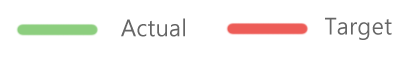
<style>
.page{position:relative;width:415px;height:59px;background:#ffffff}
.page>*{position:absolute;margin:0}
.t1{font:24px "MyanmarText";color:#666666}
</style>
<div class="page">
<p class="t1" style="left:325px;top:17px;width:67px;height:23px">Target</p>
<p class="t1" style="left:121px;top:18px;width:64px;height:19px">Actual</p>
</div>
